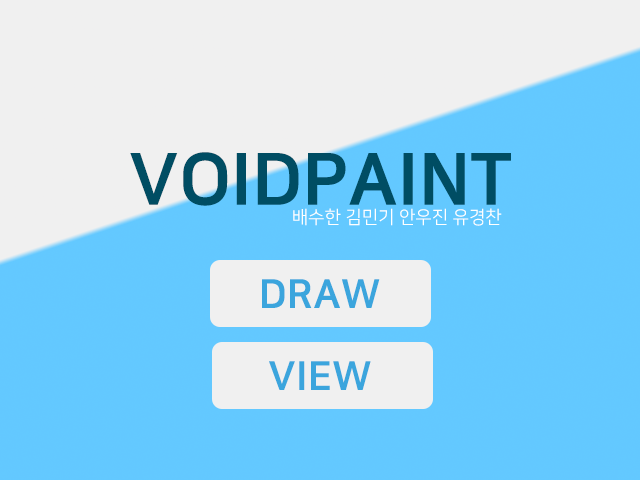
<style>
.page{position:relative;width:640px;height:480px;background:#f0f0f0}
.page>*{position:absolute;margin:0}
.t1{font:72px "NanumSquareEB";color:#004d63}
.t2{font:18px "NanumSquareR";color:#ffffff}
.t3{font:40px "NanumSquareEB";color:#3ba5dd}
</style>
<div class="page">
<p class="t1" style="left:130px;top:152px;width:381px;height:54px">VOIDPAINT</p>
<p class="t2" style="left:293px;top:208px;width:209px;height:18px">배수한 김민기 안우진 유경찬</p>
<p class="t3" style="left:262px;top:279px;width:118px;height:29px">DRAW</p>
<p class="t3" style="left:269px;top:361px;width:102px;height:29px">VIEW</p>
</div>
